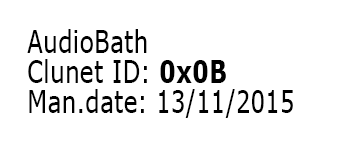
<style>
.page{position:relative;width:341px;height:156px;background:#ffffff}
.page>*{position:absolute;margin:0}
.t1{font:30.8px "Tahoma";letter-spacing:0.04em;color:#000000;scale:0.81 1}
.t2{font:30.8px "Tahoma-Bold";letter-spacing:0.04em;color:#000000;scale:0.81 1}
</style>
<div class="page">
<p class="t1" style="left:27px;top:29px;width:266px;height:89px">AudioBath<br>Clunet ID: <span class="t2">0x0B<br></span>Man.date: 13/11/2015</p>
</div>
